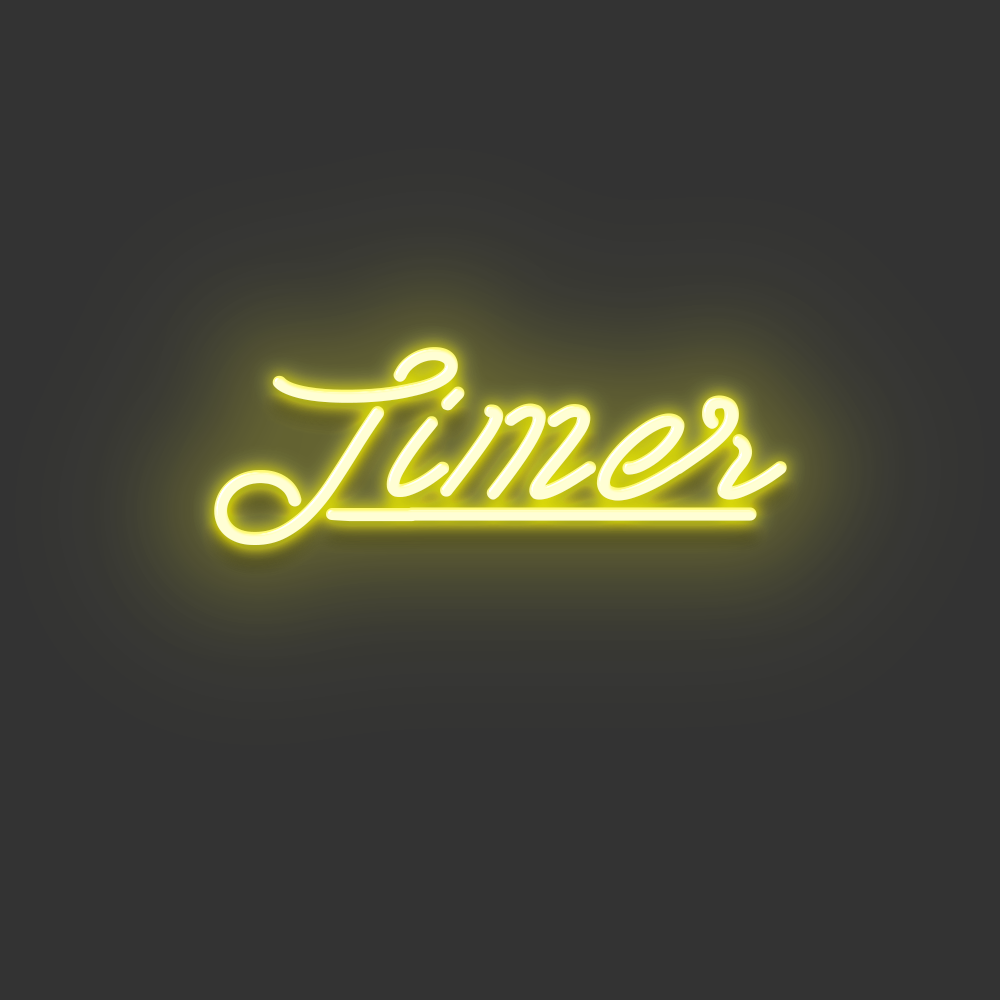
<style>
.page{position:relative;width:1000px;height:1000px;background:#333333}
.page>*{position:absolute;margin:0}
.t1{font:250px "LasEnterPersonalUseOnly";color:#fffed4}
</style>
<div class="page">
<p class="t1" style="left:214px;top:347px;width:573px;height:198px">Timer</p>
</div>
